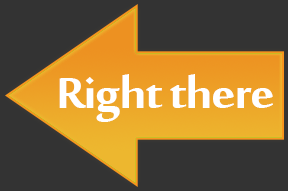
<style>
.page{position:relative;width:288px;height:191px;background:#333333}
.page>*{position:absolute;margin:0}
.t1{font:66px "MoolBoran";letter-spacing:-0.025em;color:#ffffff;scale:1.14 1}
</style>
<div class="page">
<p class="t1" style="left:59px;top:74px;width:214px;height:48px">Right there</p>
</div>
